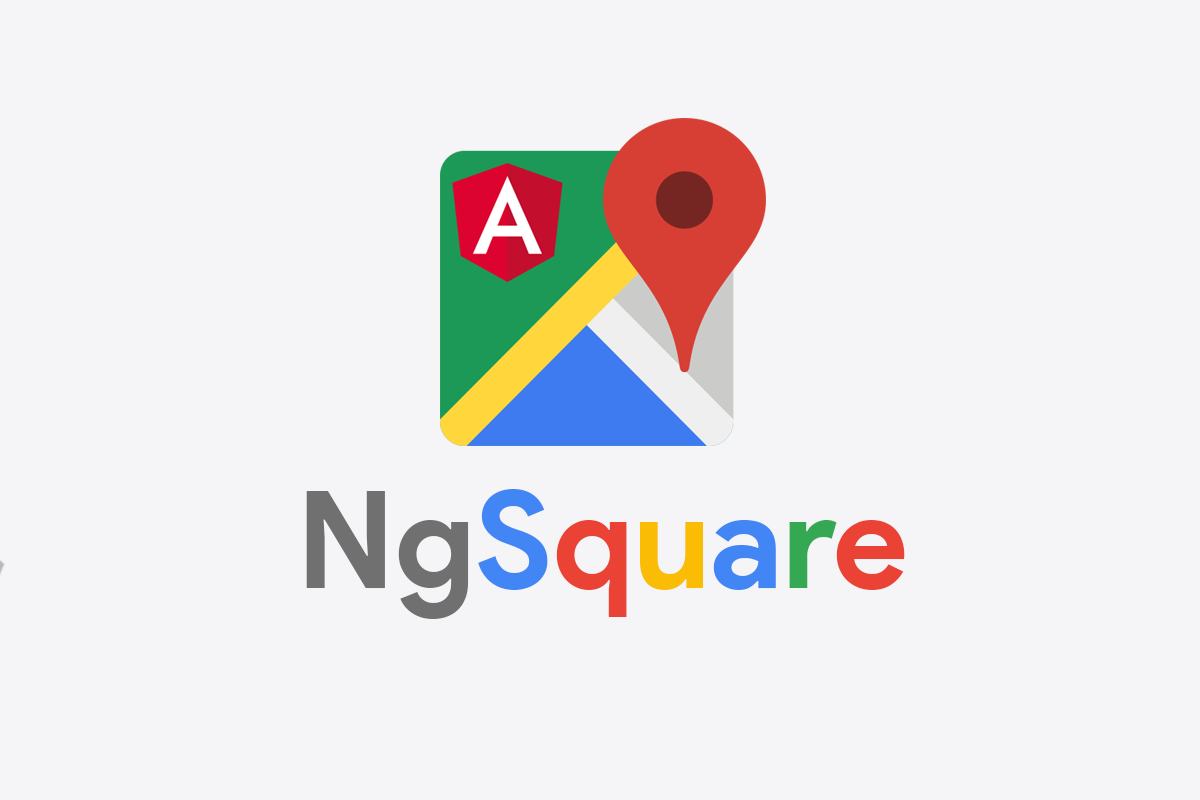
<style>
.page{position:relative;width:1200px;height:800px;background:#f5f5f7}
.page>*{position:absolute;margin:0}
.t1{font:135px "ProductSans-Bold";color:#707071}
.t2{font:135px "ProductSans-Bold";color:#4285f4}
.t3{font:135px "ProductSans-Bold";color:#ea4335}
.t4{font:135px "ProductSans-Bold";color:#fbbc05}
.t5{font:135px "ProductSans-Bold";color:#34a853}
</style>
<div class="page">
<p class="t1" style="left:306px;top:489px;width:599px;height:130px">Ng<span class="t2">S</span><span class="t3">q</span><span class="t4">u</span><span class="t2">a</span><span class="t5">r</span><span class="t3">e</span></p>
</div>
